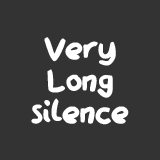
<style>
.page{position:relative;width:160px;height:160px;background:#333333}
.page>*{position:absolute;margin:0}
.t1{font:35.9px/31.9px "QAReports";color:#ffffff}
</style>
<div class="page">
<p class="t1" style="left:31px;top:37px;width:98px;height:88px;text-align:center">Very<br>Long<br>silence</p>
</div>
